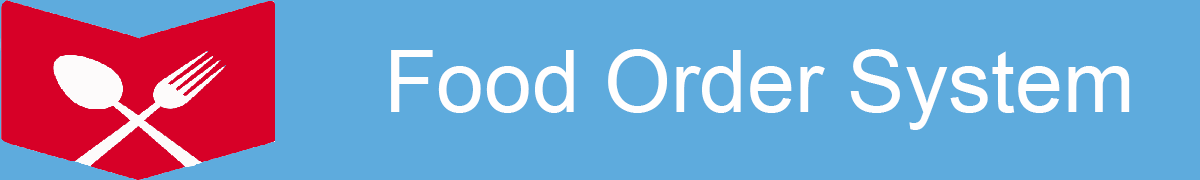
<style>
.page{position:relative;width:1200px;height:180px;background:#5eabdd}
.page>*{position:absolute;margin:0}
.t1{font:86px "ArialMT";color:#fffefe}
</style>
<div class="page">
<p class="t1" style="left:391px;top:49px;width:739px;height:81px">Food Order System</p>
</div>
